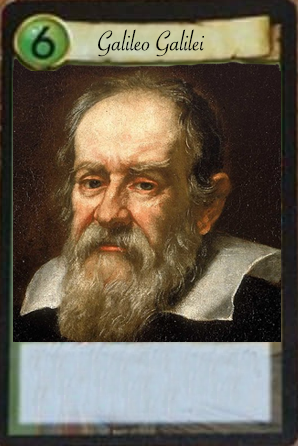
<style>
.page{position:relative;width:298px;height:446px}
.page>*{position:absolute;margin:0}
.t1{font:30px "SavoyeLetPlain";color:#000000}
</style>
<div class="page">
<p class="t1" style="left:98px;top:29px;width:106px;height:28px">Galileo Galilei</p>
</div>
